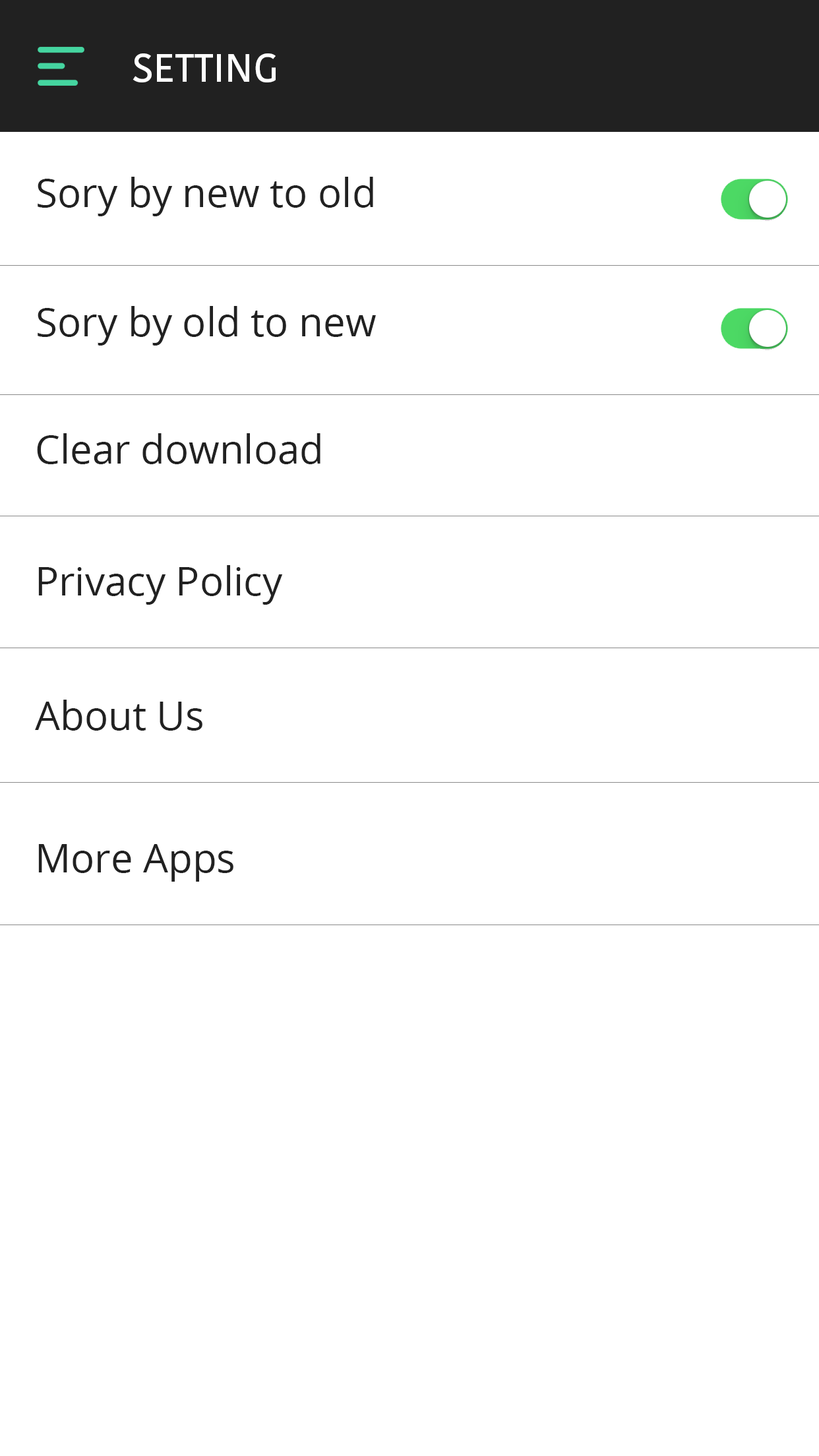
<style>
.page{position:relative;width:819px;height:1456px;background:#ffffff}
.page>*{position:absolute;margin:0}
.t1{font:39.6px "KohinoorBangla-Medium";color:#ffffff}
.t2{font:39.6px "OpenSans";color:#212121}
</style>
<div class="page">
<p class="t1" style="left:133px;top:53px;width:143px;height:29px">SETTING</p>
<p class="t2" style="left:38px;top:177px;width:335px;height:39px">Sory by new to old</p>
<p class="t2" style="left:38px;top:306px;width:338px;height:40px">Sory by old to new</p>
<p class="t2" style="left:37px;top:433px;width:283px;height:31px">Clear download</p>
<p class="t2" style="left:38px;top:565px;width:245px;height:40px">Privacy Policy</p>
<p class="t2" style="left:35px;top:700px;width:167px;height:31px">About Us</p>
<p class="t2" style="left:38px;top:844px;width:195px;height:38px">More Apps</p>
</div>
